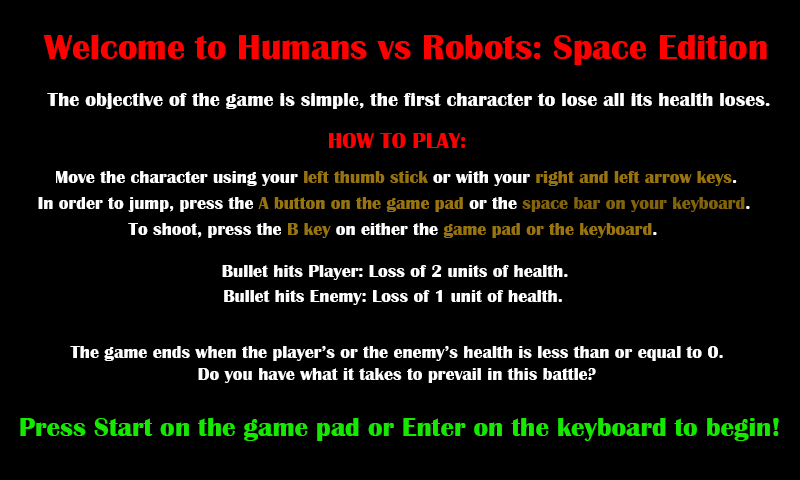
<style>
.page{position:relative;width:800px;height:480px;background:#000000}
.page>*{position:absolute;margin:0}
.t1{font:36px "BritannicBold";color:#ff0000}
.t2{font:20px "BritannicBold";color:#ffffff}
.t3{font:22px "BritannicBold";color:#ff0000}
.t4{font:18px "BritannicBold";color:#ffffff}
.t5{font:18px "BritannicBold";color:#987411}
.t6{font:18px "BritannicBold";color:#83640d}
.t7{font:27px "BritannicBold";color:#16e800}
</style>
<div class="page">
<p class="t1" style="left:43px;top:34px;width:724px;height:31px">Welcome to Humans vs Robots: Space Edition</p>
<p class="t2" style="left:47px;top:93px;width:723px;height:16px">The objective of the game is simple, the first character to lose all its health loses.</p>
<p class="t3" style="left:329px;top:133px;width:136px;height:15px">HOW TO PLAY:</p>
<p class="t4" style="left:56px;top:171px;width:681px;height:15px">Move the character using your <span class="t5">left thumb stick </span>or with your <span class="t5">right and left arrow keys</span>.</p>
<p class="t4" style="left:38px;top:197px;width:712px;height:15px">In order to jump, press the <span class="t5">A button on the game pad</span> or the <span class="t6">space bar on your keyboard</span>.</p>
<p class="t5" style="left:128px;top:223px;width:529px;height:15px"><span class="t4">To shoot, press the </span>B key<span class="t4"> on either the </span>game pad or the keyboard<span class="t4">.</span></p>
<p class="t4" style="left:222px;top:265px;width:346px;height:15px">Bullet hits Player: Loss of 2 units of health.</p>
<p class="t4" style="left:224px;top:290px;width:338px;height:15px">Bullet hits Enemy: Loss of 1 unit of health.</p>
<p class="t4" style="left:70px;top:346px;width:653px;height:37px;text-align:center">The game ends when the player’s or the enemy’s health is less than or equal to 0.<br>Do you have what it takes to prevail in this battle?</p>
<p class="t7" style="left:20px;top:417px;width:759px;height:24px">Press Start on the game pad or Enter on the keyboard to begin!</p>
</div>
